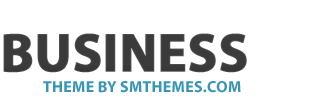
<style>
.page{position:relative;width:309px;height:112px;background:#ffffff}
.page>*{position:absolute;margin:0}
.t1{font:55px "MyriadPro-Bold";letter-spacing:-0.025em;color:#3b3b3b;text-transform:uppercase;font-weight:bold}
.t2{font:16px "MyriadPro-Bold";color:#3995b4;text-transform:uppercase;font-weight:bold}
</style>
<div class="page">
<p class="t1" style="left:3px;top:33px;width:244px;height:40px">Business</p>
<p class="t2" style="left:43px;top:81px;width:198px;height:12px">theme by SMThemes.com</p>
</div>
